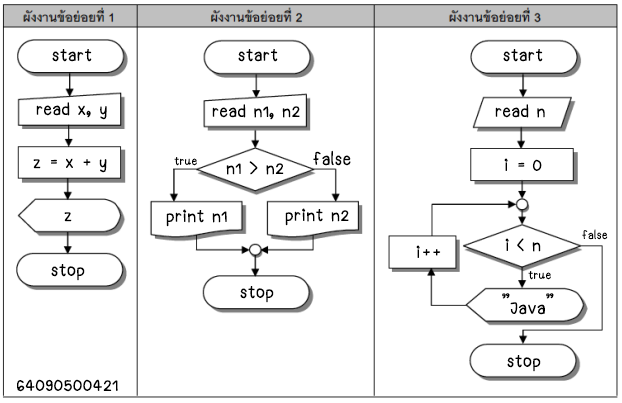
<style>
.page{position:relative;width:622px;height:403px;background:#ffffff}
.page>*{position:absolute;margin:0}
.t1{font:24px "chocolateteehaypaiTEST-Reg";color:#000000}
.t2{font:16px "chocolateteehaypaiTEST-Reg";color:#000000}
</style>
<div class="page">
<p class="t1" style="left:52px;top:49px;width:40px;height:13px">start</p>
<p class="t1" style="left:238px;top:49px;width:40px;height:13px">start</p>
<p class="t1" style="left:503px;top:49px;width:40px;height:13px">start</p>
<p class="t1" style="left:36px;top:102px;width:71px;height:18px">read x, y</p>
<p class="t1" style="left:212px;top:104px;width:88px;height:16px">read n1, n2</p>
<p class="t1" style="left:495px;top:104px;width:50px;height:14px">read n</p>
<p class="t1" style="left:313px;top:150px;width:38px;height:16px">false</p>
<p class="t1" style="left:33px;top:158px;width:74px;height:15px">z = x + y</p>
<p class="t2" style="left:174px;top:157px;width:23px;height:9px">true</p>
<p class="t1" style="left:226px;top:161px;width:58px;height:14px">n1 &gt; n2</p>
<p class="t1" style="left:504px;top:158px;width:38px;height:13px">i = 0</p>
<p class="t1" style="left:166px;top:209px;width:61px;height:18px">print n1</p>
<p class="t1" style="left:285px;top:208px;width:64px;height:18px">print n2</p>
<p class="t1" style="left:64px;top:212px;width:8px;height:10px">z</p>
<p class="t2" style="left:582px;top:229px;width:26px;height:11px">false</p>
<p class="t1" style="left:416px;top:245px;width:25px;height:13px">i++</p>
<p class="t1" style="left:505px;top:238px;width:36px;height:14px">i &lt; n</p>
<p class="t1" style="left:51px;top:264px;width:34px;height:17px">stop</p>
<p class="t2" style="left:528px;top:271px;width:23px;height:9px">true</p>
<p class="t1" style="left:240px;top:286px;width:34px;height:17px">stop</p>
<p class="t1" style="left:502px;top:293px;width:52px;height:22px">”Java”</p>
<p class="t1" style="left:507px;top:355px;width:34px;height:17px">stop</p>
<p class="t1" style="left:17px;top:379px;width:101px;height:13px">64090500421</p>
</div>
